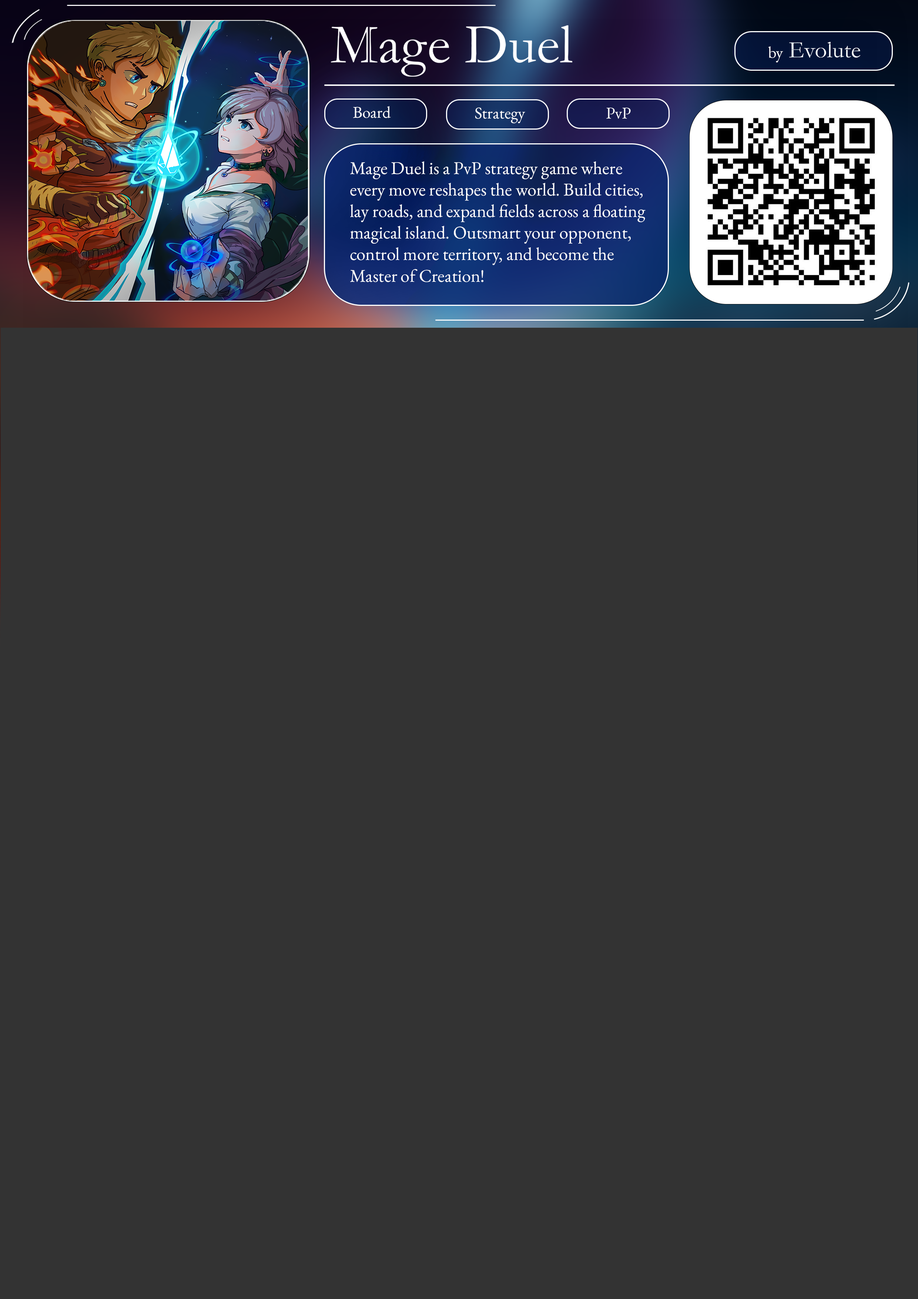
<style>
.page{position:relative;width:918px;height:1299px;background:#333333}
.page>*{position:absolute;margin:0}
.t1{font:16.2px "EBGaramond-Regular";color:#ffffff}
.t2{font:16.4px "EBGaramond-Regular";color:#ffffff}
.t3{font:18px "EBGaramond-Regular";color:#ffffff}
</style>
<div class="page">
<p class="t1" style="left:768px;top:46px;width:15px;height:17px">by</p>
<p class="t2" style="left:353px;top:106px;width:38px;height:12px">Board</p>
<p class="t2" style="left:475px;top:107px;width:50px;height:16px">Strategy</p>
<p class="t2" style="left:606px;top:107px;width:25px;height:12px">PvP</p>
<p class="t3" style="left:350px;top:161px;width:296px;height:121px">Mage Duel is a PvP strategy game where every move reshapes the world. Build cities, lay roads, and expand fields across a floating magical island. Outsmart your opponent, control more territory, and become the Master of Creation!</p>
</div>
